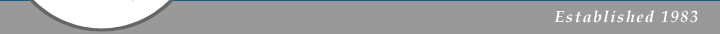
<style>
.page{position:relative;width:720px;height:34px;background:#999999}
.page>*{position:absolute;margin:0}
.t1{font:16px "BookAntiqua-BoldItalic";letter-spacing:0.1em;color:#ffffff}
</style>
<div class="page">
<p class="t1" style="left:554px;top:10px;width:144px;height:13px">Established 1983</p>
</div>
